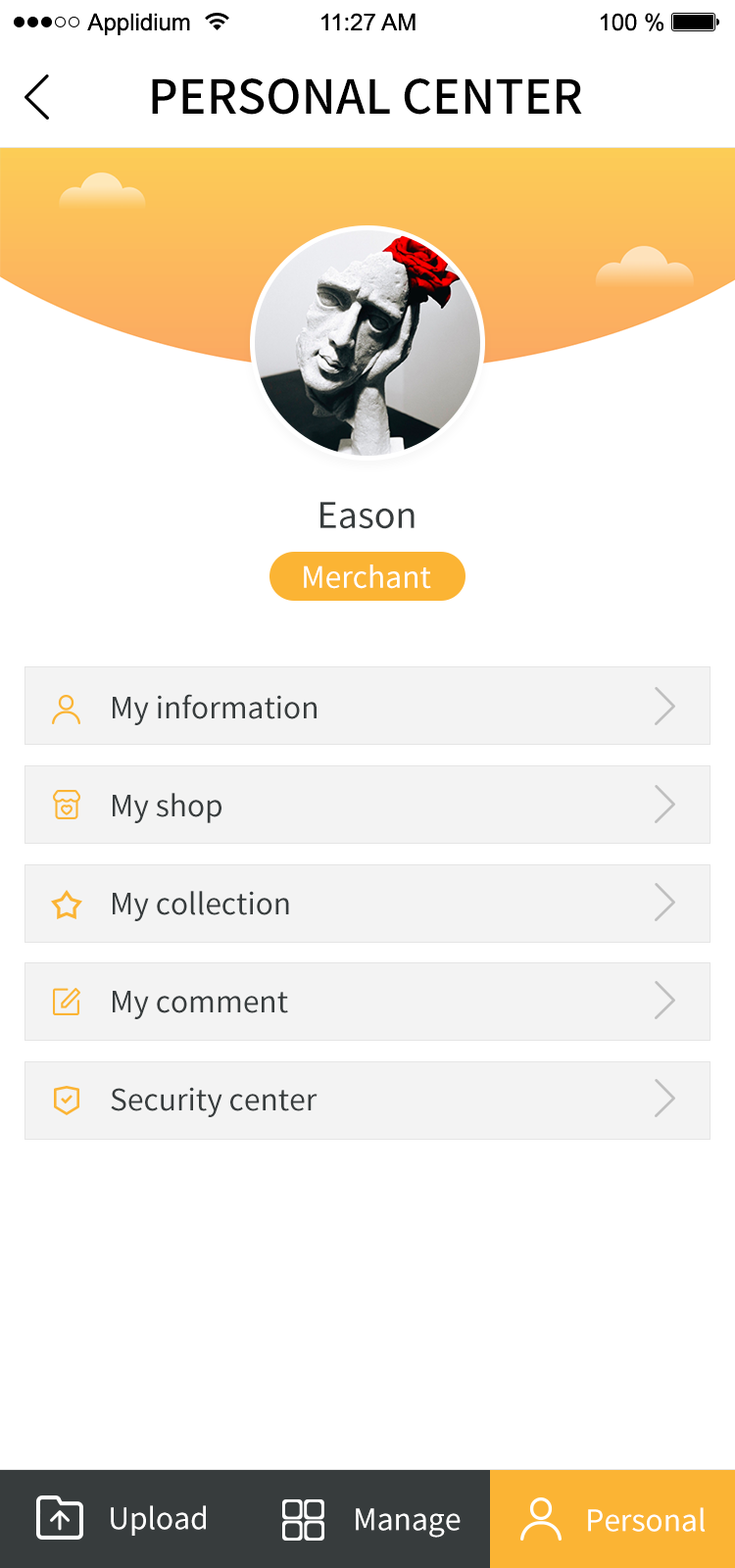
<style>
.page{position:relative;width:735px;height:1568px;background:#ffffff}
.page>*{position:absolute;margin:0}
.t1{font:47px "SourceHanSansCN-Medium";color:#010101;text-transform:uppercase}
.t2{font:35.3px "SourceHanSansCN-Regular";color:#373c3d}
.t3{font:29.4px "SourceHanSansCN-Regular";color:#ffffff}
.t4{font:29.4px/98px "SourceHanSansCN-Regular";color:#373c3d}
</style>
<div class="page">
<p class="t1" style="left:152px;top:78px;width:430px;height:37px">Personal center</p>
<p class="t2" style="left:320px;top:502px;width:95px;height:27px">Eason</p>
<p class="t3" style="left:304px;top:564px;width:127px;height:25px">Merchant</p>
<p class="t4" style="left:111px;top:694px;width:207px;height:423px">My information<br>My shop<br>My collection<br>My comment<br>Security center</p>
<p class="t3" style="left:111px;top:1505px;width:95px;height:31px">Upload</p>
<p class="t3" style="left:356px;top:1508px;width:105px;height:30px">Manage</p>
<p class="t3" style="left:588px;top:1507px;width:118px;height:25px">Personal</p>
</div>
